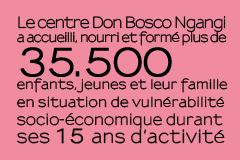
<style>
.page{position:relative;width:240px;height:160px;background:#f18ca0}
.page>*{position:absolute;margin:0}
.t1{font:12.7px/14px "Sansumi-Bold";letter-spacing:-0.05em;color:#000000;scale:0.93 1}
.t2{font:24px/25px "Sansumi-Bold";letter-spacing:-0.04em;color:#000000}
.t3{font:15.4px/31px "Sansumi-Bold";letter-spacing:-0.07em;color:#000000;scale:0.93 1}
.t4{font:38.2px/34px "Sansumi-Bold";letter-spacing:-0.06em;color:#000000;font-weight:bold;scale:0.93 1}
.t5{font:12.7px/13px "Sansumi-Bold";letter-spacing:0.019em;color:#000000;scale:0.93 1}
.t6{font:13.2px/18px "Sansumi-Bold";letter-spacing:0.02em;color:#000000;scale:0.93 1}
.t7{font:14.8px/18px "Sansumi-Bold";color:#000000;scale:0.93 1}
.t8{font:17.5px/18px "Sansumi-Bold";letter-spacing:0.025em;color:#000000;scale:0.93 1}
.t9{font:19.6px/18px "Sansumi-Bold";letter-spacing:0.025em;color:#000000;font-weight:bold;scale:0.93 1}
</style>
<div class="page">
<p class="t1" style="left:17px;top:16px;width:211px;height:128px"><span class="t2"><br></span><span class="t3">Le centre Don Bosco Ngangi<br></span>a accueilli, nourri et formé plus de<br><span class="t4">35.500<br></span><span class="t5">enfants, jeunes et leur famille<br></span><span class="t6">en situation de vulnérabilité<br></span><span class="t7">socio-économique durant<br></span><span class="t8">ses </span><span class="t9">15 </span><span class="t8">ans d’activité</span></p>
</div>
